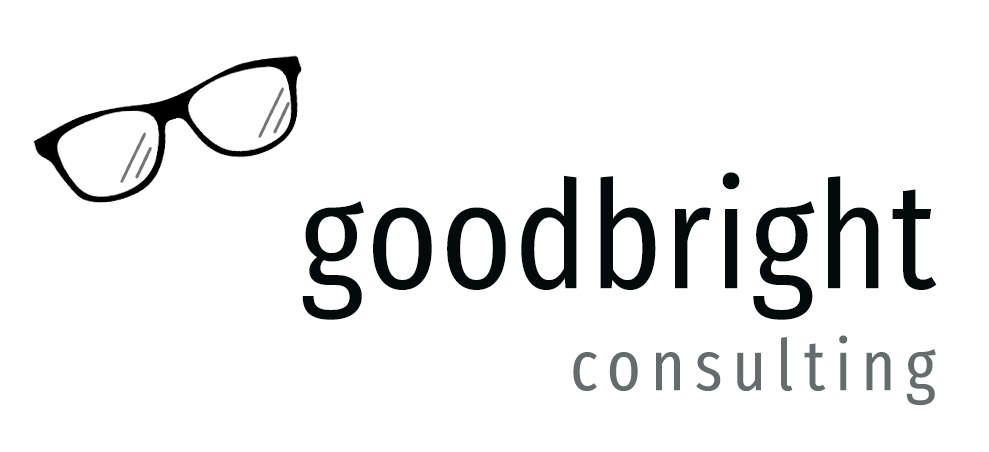
<style>
.page{position:relative;width:989px;height:452px;background:#ffffff}
.page>*{position:absolute;margin:0}
.t1{font:150px "FiraSansCompressed-Book";letter-spacing:0.012em;color:#030a0c}
.t2{font:70.8px "FiraSansCompressed-Book";letter-spacing:0.14em;color:#656c6e}
</style>
<div class="page">
<p class="t1" style="left:302px;top:172px;width:635px;height:148px">goodbright</p>
<p class="t2" style="left:573px;top:335px;width:363px;height:71px">consulting</p>
</div>
